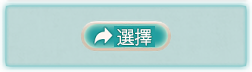
<style>
.page{position:relative;width:252px;height:72px}
.page>*{position:absolute;margin:0}
.t1{font:18px "GothicMB101Pr6N-Light";color:#fffbfa}
</style>
<div class="page">
<p class="t1" style="left:117px;top:28px;width:35px;height:18px">選擇</p>
</div>
